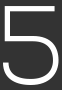
<style>
.page{position:relative;width:62px;height:90px;background:#333333}
.page>*{position:absolute;margin:0}
.t1{font:111.8px "NexaLight";color:#ffffff;scale:0.92 1}
</style>
<div class="page">
<p class="t1" style="left:3px;top:6px;width:56px;height:79px">5</p>
</div>
